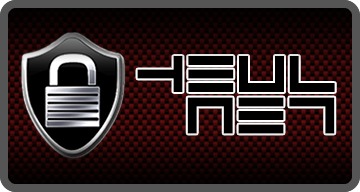
<style>
.page{position:relative;width:360px;height:192px}
.page>*{position:absolute;margin:0}
.t1{font:57.6px "Avenger";color:#000000}
</style>
<div class="page">
<p class="t1" style="left:137px;top:56px;width:198px;height:36px">heul</p>
<p class="t1" style="left:187px;top:97px;width:148px;height:37px">net</p>
</div>
